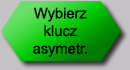
<style>
.page{position:relative;width:130px;height:70px}
.page>*{position:absolute;margin:0}
.t1{font:14.7px "ArialMT";color:#000000}
</style>
<div class="page">
<p class="t1" style="left:33px;top:7px;width:54px;height:50px;text-align:center">Wybierz<br>klucz<br>asymetr.</p>
</div>
